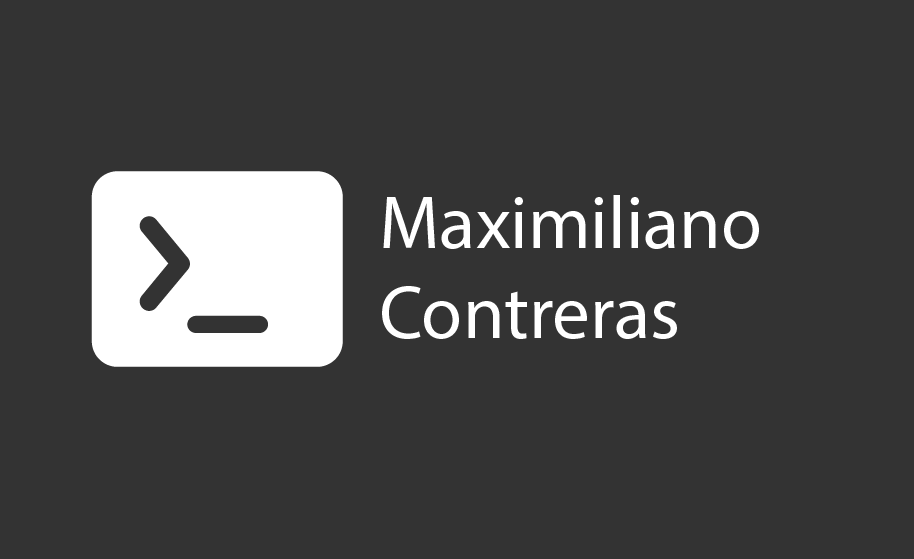
<style>
.page{position:relative;width:914px;height:559px;background:#333333}
.page>*{position:absolute;margin:0}
.t1{font:75px "MyriadPro-Regular";color:#ffffff}
</style>
<div class="page">
<p class="t1" style="left:382px;top:195px;width:377px;height:144px">Maximiliano<br>Contreras</p>
</div>
